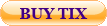
<style>
.page{position:relative;width:107px;height:26px}
.page>*{position:absolute;margin:0}
.t1{font:15px "Georgia-Bold";color:#400087}
</style>
<div class="page">
<p class="t1" style="left:20px;top:8px;width:68px;height:11px">BUY TIX</p>
</div>
